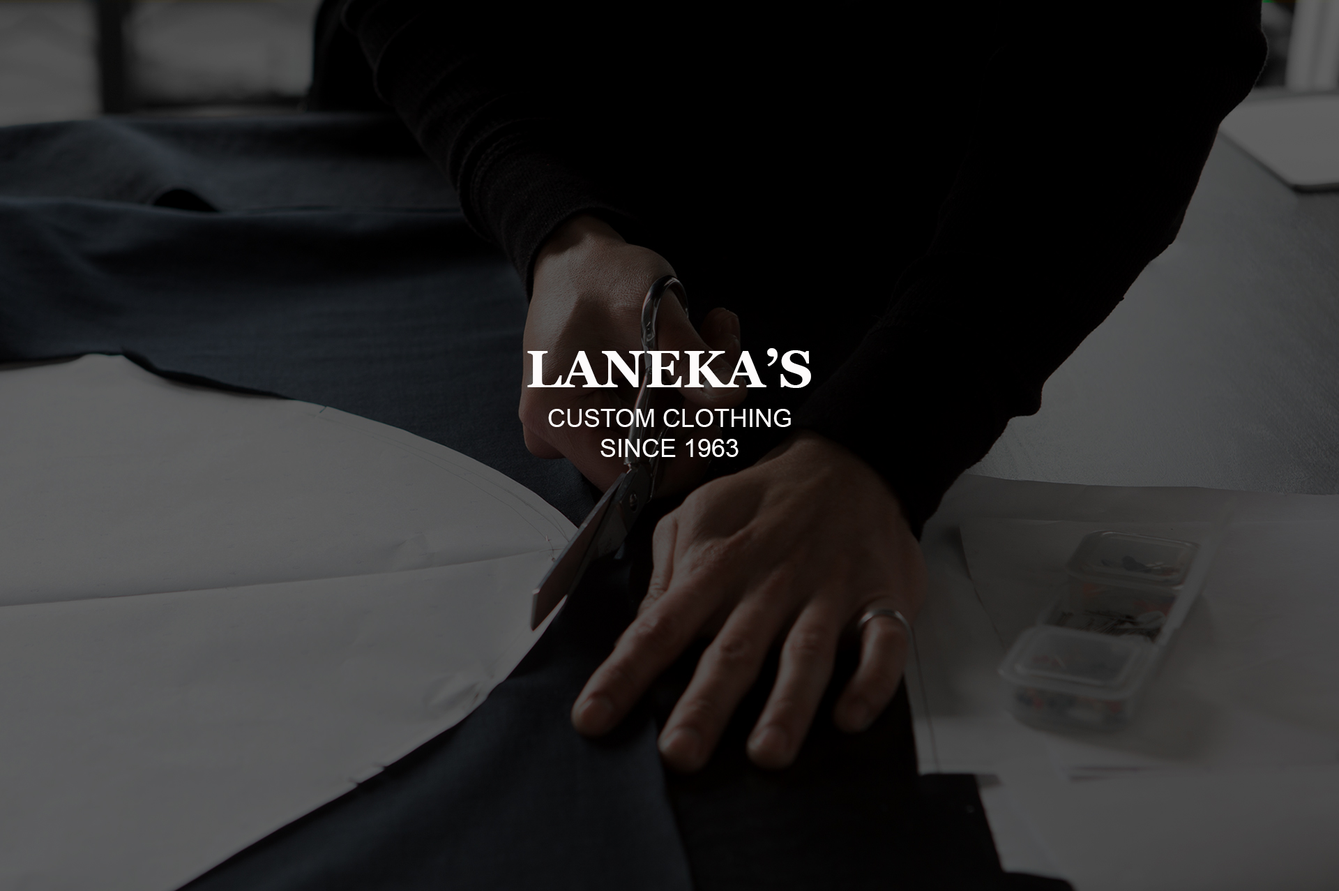
<style>
.page{position:relative;width:1339px;height:891px}
.page>*{position:absolute;margin:0}
.t1{font:52.3px "Georgia-Bold";color:#fdfbfb}
.t2{font:25.1px "ArialMT";color:#fdfbfb}
</style>
<div class="page">
<p class="t1" style="left:527px;top:348px;width:284px;height:40px">LANEKA’S</p>
<p class="t2" style="left:548px;top:409px;width:243px;height:48px;text-align:center">CUSTOM CLOTHING<br>SINCE 1963</p>
</div>
